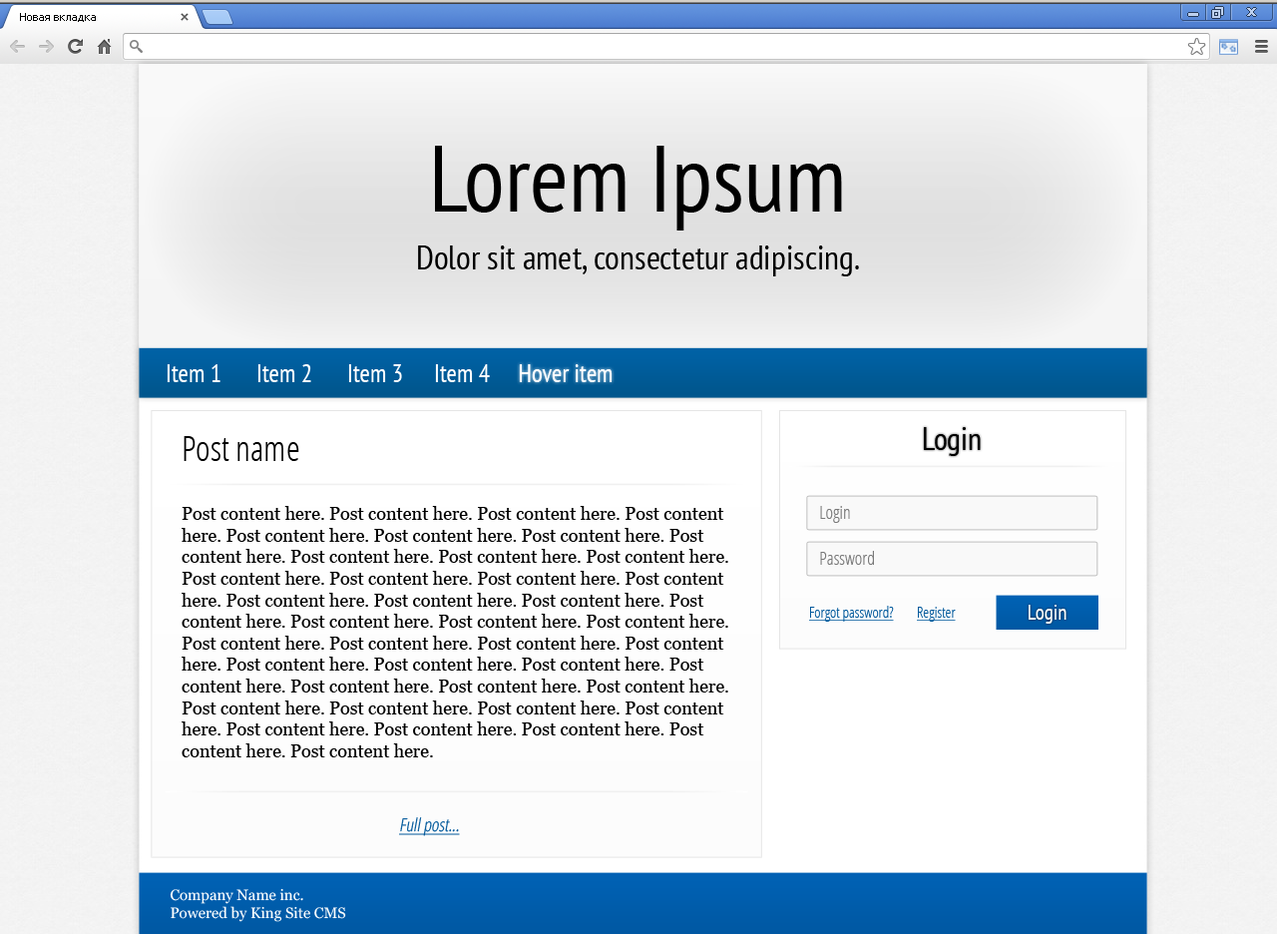
<style>
.page{position:relative;width:1277px;height:934px;background:#ffffff}
.page>*{position:absolute;margin:0}
.t1{font:93.8px "PTSans-Narrow";color:#000000}
.t2{font:33.9px "PTSans-Narrow";color:#000000}
.t3{font:24.9px "PTSans-Narrow";color:#ffffff}
.t4{font:34.9px "OpenSans-CondensedLight";color:#000000}
.t5{font:31.9px "PTSans-Narrow";color:#000000}
.t6{font:18px "Georgia";color:#000000}
.t7{font:18px "OpenSans-CondensedLight";color:#797979}
.t8{font:15px "OpenSans-CondensedLight";color:#00589b;text-decoration:underline}
.t9{font:21px "PTSans-Narrow";color:#ffffff}
.t10{font:18px "OpenSans-CondensedLight";color:#00589b;font-style:italic;text-decoration:underline}
.t11{font:15px "Georgia";color:#ffffff}
</style>
<div class="page">
<p class="t1" style="left:435px;top:146px;width:407px;height:84px">Lorem Ipsum</p>
<p class="t2" style="left:418px;top:245px;width:441px;height:31px">Dolor sit amet, consectetur adipiscing.</p>
<p class="t3" style="left:167px;top:364px;width:53px;height:18px">Item 1</p>
<p class="t3" style="left:257px;top:364px;width:54px;height:18px">Item 2</p>
<p class="t3" style="left:348px;top:364px;width:54px;height:18px">Item 3</p>
<p class="t3" style="left:435px;top:364px;width:55px;height:18px">Item 4</p>
<p class="t3" style="left:519px;top:364px;width:94px;height:18px">Hover item</p>
<p class="t4" style="left:184px;top:436px;width:115px;height:25px">Post name</p>
<p class="t5" style="left:924px;top:427px;width:57px;height:29px">Login</p>
<p class="t6" style="left:182px;top:506px;width:546px;height:251px">Post content here. Post content here. Post content here. Post content here. Post content here. Post content here. Post content here. Post content here. Post content here. Post content here. Post content here. Post content here. Post content here. Post content here. Post content here. Post content here. Post content here. Post content here. Post content here. Post content here. Post content here. Post content here. Post content here. Post content here. Post content here. Post content here. Post content here. Post content here. Post content here. Post content here. Post content here. Post content here. Post content here. Post content here. Post content here. Post content here. Post content here. Post content here. Post content here. Post content here. Post content here. Post content here.</p>
<p class="t7" style="left:820px;top:506px;width:30px;height:17px">Login</p>
<p class="t7" style="left:820px;top:551px;width:54px;height:14px">Password</p>
<p class="t8" style="left:809px;top:606px;width:85px;height:16px">Forgot password?</p>
<p class="t9" style="left:1029px;top:605px;width:37px;height:19px">Login</p>
<p class="t8" style="left:917px;top:607px;width:39px;height:15px">Register</p>
<p class="t10" style="left:399px;top:817px;width:61px;height:19px">Full post...</p>
<p class="t11" style="left:170px;top:888px;width:176px;height:34px">Company Name inc. <br>Powered by King Site CMS</p>
</div>
